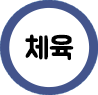
<style>
.page{position:relative;width:98px;height:95px;background:#ffffff}
.page>*{position:absolute;margin:0}
.t1{font:30px "BMJUA";color:#000000}
</style>
<div class="page">
<p class="t1" style="left:25px;top:34px;width:49px;height:27px">체육</p>
</div>
